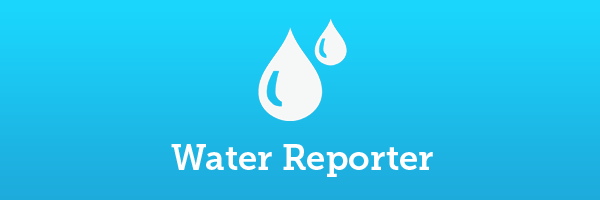
<style>
.page{position:relative;width:600px;height:200px}
.page>*{position:absolute;margin:0}
.t1{font:35.3px "MuseoSlab-700";color:#ffffff}
</style>
<div class="page">
<p class="t1" style="left:171px;top:144px;width:262px;height:33px">Water Reporter</p>
</div>
